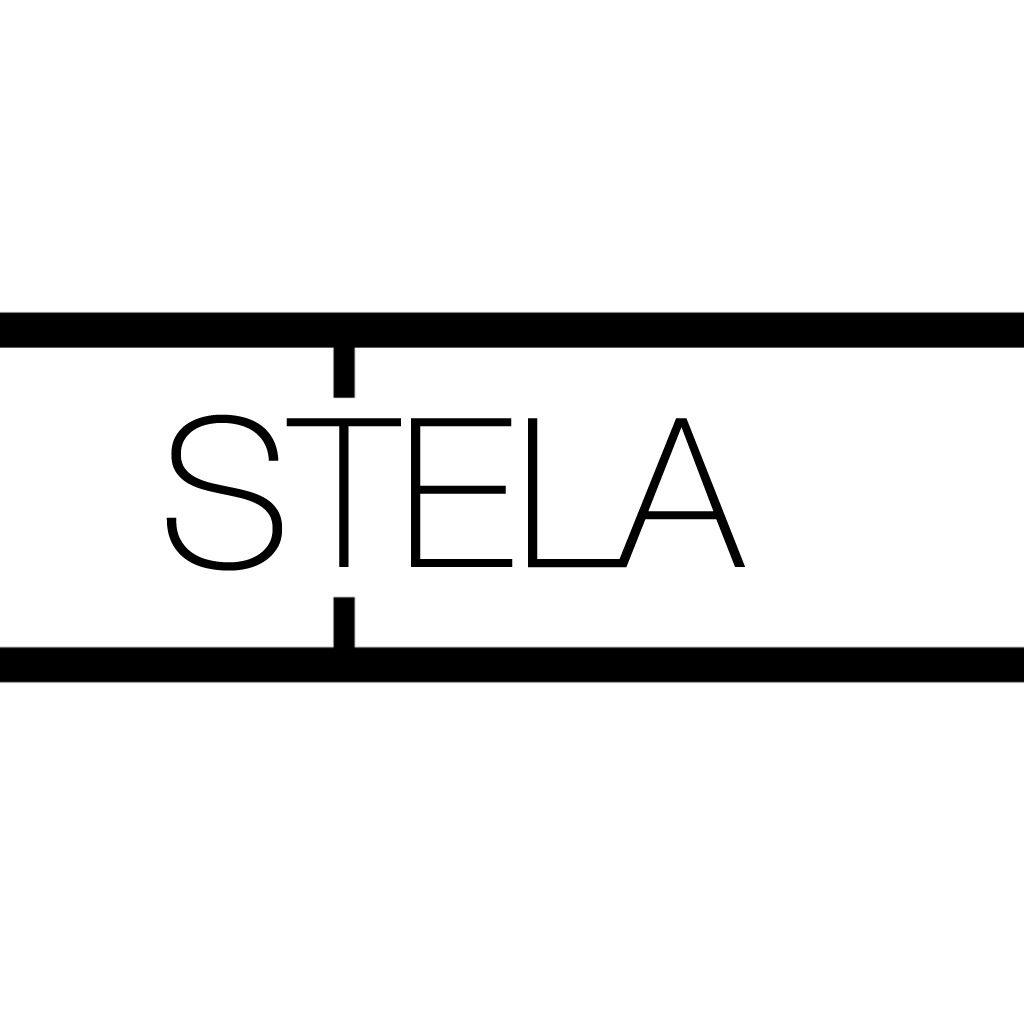
<style>
.page{position:relative;width:1024px;height:1024px;background:#ffffff}
.page>*{position:absolute;margin:0}
.t1{font:208.2px "HelveticaNeue-Thin";color:#000000}
</style>
<div class="page">
<p class="t1" style="left:166px;top:414px;width:579px;height:157px">STELA</p>
</div>
